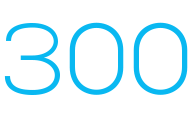
<style>
.page{position:relative;width:194px;height:114px;background:#ffffff}
.page>*{position:absolute;margin:0}
.t1{font:100.5px "NexaLight";color:#09b8f1}
</style>
<div class="page">
<p class="t1" style="left:4px;top:22px;width:184px;height:73px">300</p>
</div>
